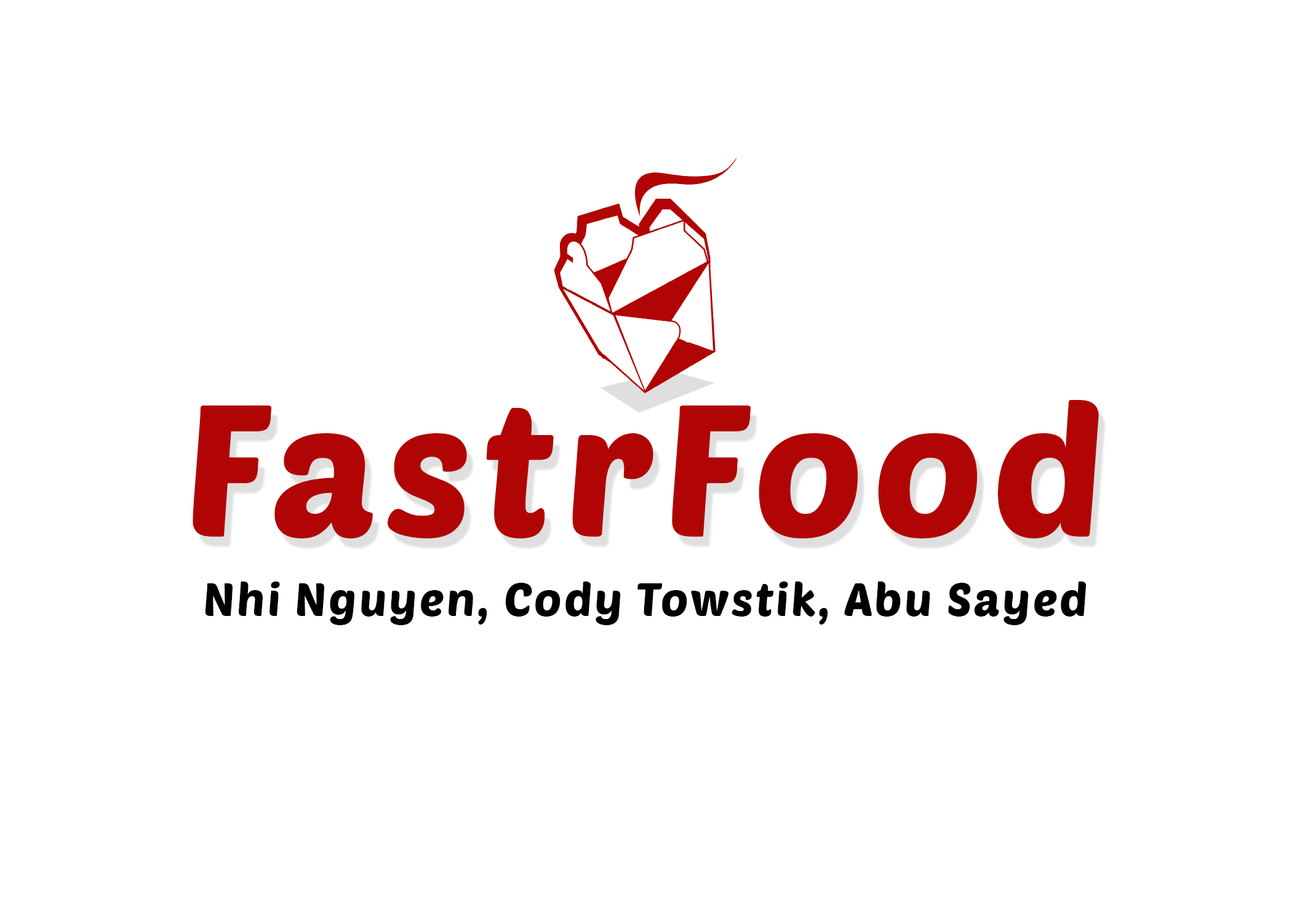
<style>
.page{position:relative;width:1292px;height:923px;background:#ffffff}
.page>*{position:absolute;margin:0}
.t1{font:184.6px "PoetsenOne-Regular";letter-spacing:0.05em;color:#b10505}
.t2{font:46.1px "PoetsenOne-Regular";letter-spacing:0.05em;color:#000000}
</style>
<div class="page">
<p class="t1" style="left:193px;top:400px;width:906px;height:138px">FastrFood</p>
<p class="t2" style="left:205px;top:581px;width:882px;height:44px">Nhi Nguyen, Cody Towstik, Abu Sayed</p>
</div>
